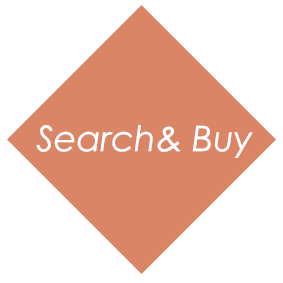
<style>
.page{position:relative;width:283px;height:283px;background:#ffffff}
.page>*{position:absolute;margin:0}
.t1{font:35.2px "CenturyGothic-Italic";color:#ffffff}
</style>
<div class="page">
<p class="t1" style="left:36px;top:125px;width:217px;height:33px">Search&amp; Buy</p>
</div>
